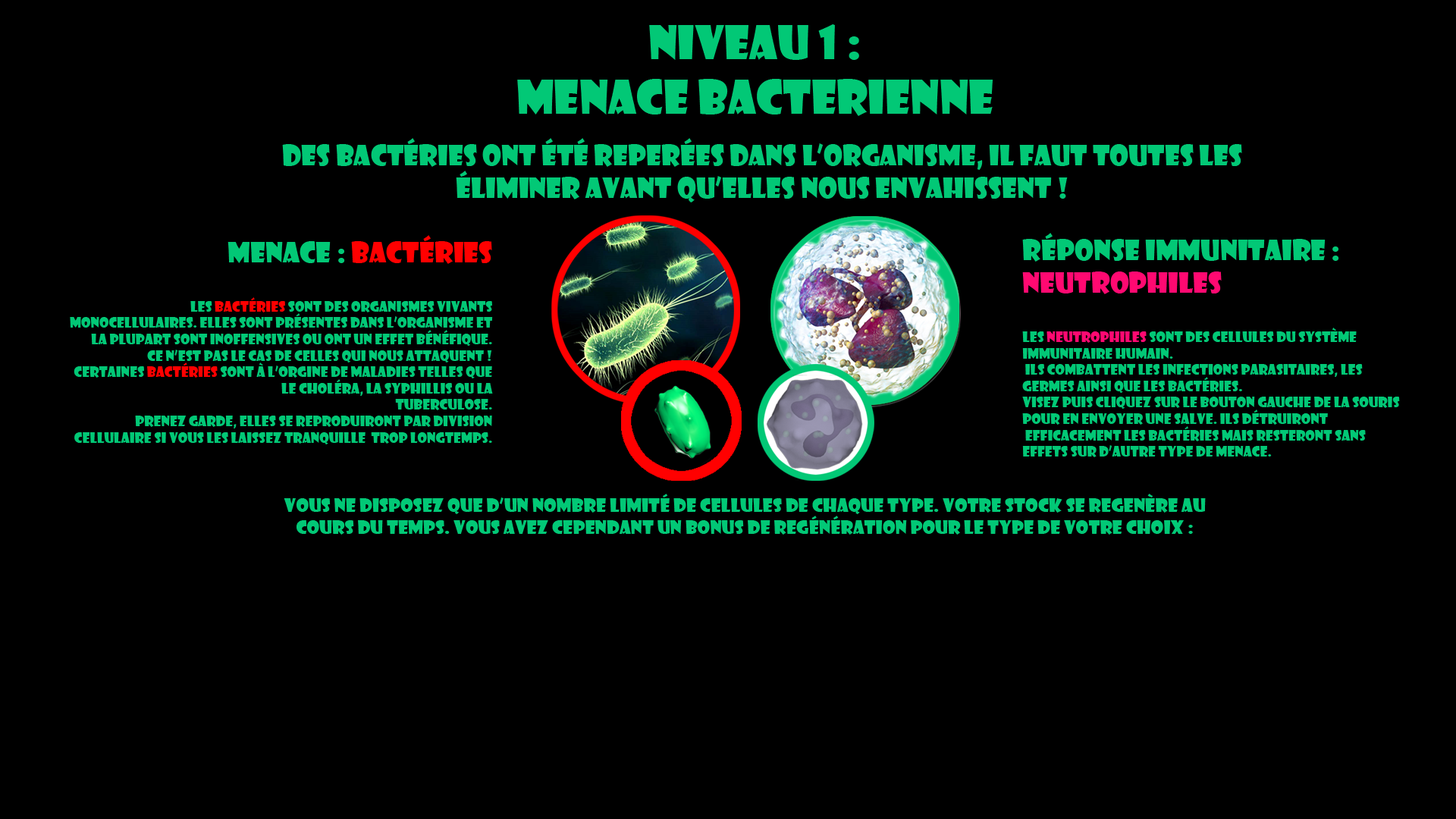
<style>
.page{position:relative;width:1456px;height:819px;background:#000000}
.page>*{position:absolute;margin:0}
.t1{font:45.5px "ShowcardGothic-Reg";color:#02c876}
.t2{font:27.3px "ShowcardGothic-Reg";color:#02c876}
.t3{font:13.6px "ShowcardGothic-Reg";color:#02c876}
.t4{font:27.3px "ShowcardGothic-Reg";color:#ff0971}
.t5{font:13.6px "ShowcardGothic-Reg";color:#ff0971}
.t6{font:27.3px "ShowcardGothic-Reg";color:#ff0000}
.t7{font:13.6px "ShowcardGothic-Reg";color:#ff0000}
.t8{font:18.2px "ShowcardGothic-Reg";color:#02c876}
</style>
<div class="page">
<p class="t1" style="left:517px;top:24px;width:476px;height:92px;text-align:center">Niveau 1 : <br>MENACE Bacterienne</p>
<p class="t2" style="left:282px;top:138px;width:960px;height:64px;text-align:center">dES BACtéries ont été reperées dans l’organisme, il faut toutes les éliminer avant qu’elles nous envahissent !</p>
<p class="t3" style="left:1022px;top:233px;width:378px;height:224px"><span class="t2">Réponse immunitaire :<br></span><span class="t4">Neutrophiles<br><br></span>Les <span class="t5">neutrophiles </span>sont des cellules du système immunitaire humain.<br> Ils combattent les infections parasitaires, les germes ainsi que les bactéries. <br>Visez puis cliquez sur le bouton gauche de la souris pour en envoyer une salve. Ils détruiront<br> efficacement les bactéries mais resteront sans effets sur d’autre type de menace.</p>
<p class="t3" style="left:70px;top:235px;width:423px;height:209px;text-align:right"><span class="t2">Menace : </span><span class="t6">Bactéries<br><br></span>Les <span class="t7">bactéries</span> Sont des organismes vivants<br> monocellulaires. Elles sont présentes dans l’organisme et<br> la plupart sont inoffensives ou ont un effet bénéfique. <br>Ce n’est pas le cas de celles qui nous attaquent !<br>Certaines <span class="t7">bactéries</span> sont à l’orgine de maladies telles que le choléra, la syphillis ou la <br>tuberculose.<br>Prenez garde, elles se reproduiront par division <br>cellulaire si vous les laissez tranquille  trop longtemps.</p>
<p class="t8" style="left:284px;top:494px;width:922px;height:41px;text-align:center">VOUS NE DISPOSEZ QUE D’un nombre limité de cellules de chaque type. Votre stock se regenère au cours du temps. Vous avez cependant un bonus de regénération pour le type de votre choix :</p>
</div>
